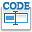
<style>
.page{position:relative;width:32px;height:32px;background:#ffffff}
.page>*{position:absolute;margin:0}
.t1{font:14px "Aparajita";color:#0f70ae;font-weight:bold;scale:0.85 1}
</style>
<div class="page">
<p class="t1" style="left:3px;top:2px;width:27px;height:8px">CODE</p>
</div>
